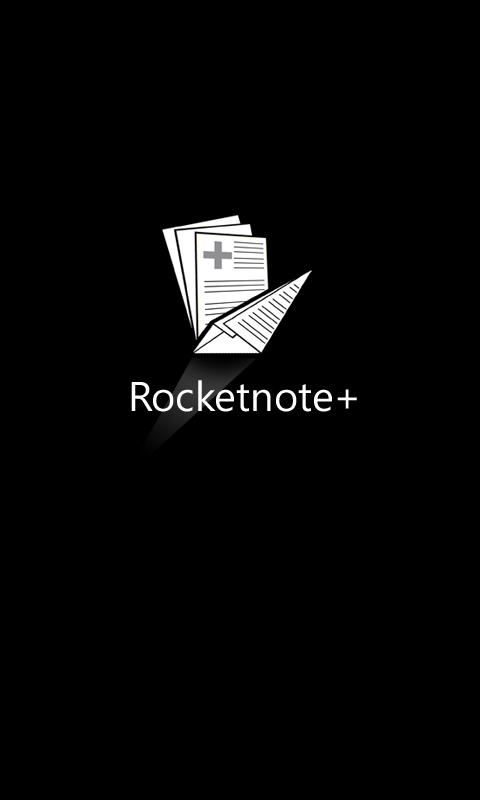
<style>
.page{position:relative;width:480px;height:800px;background:#000000}
.page>*{position:absolute;margin:0}
.t1{font:41.5px "SegoeWP";color:#ffffff}
</style>
<div class="page">
<p class="t1" style="left:131px;top:380px;width:226px;height:32px">Rocketnote+</p>
</div>
